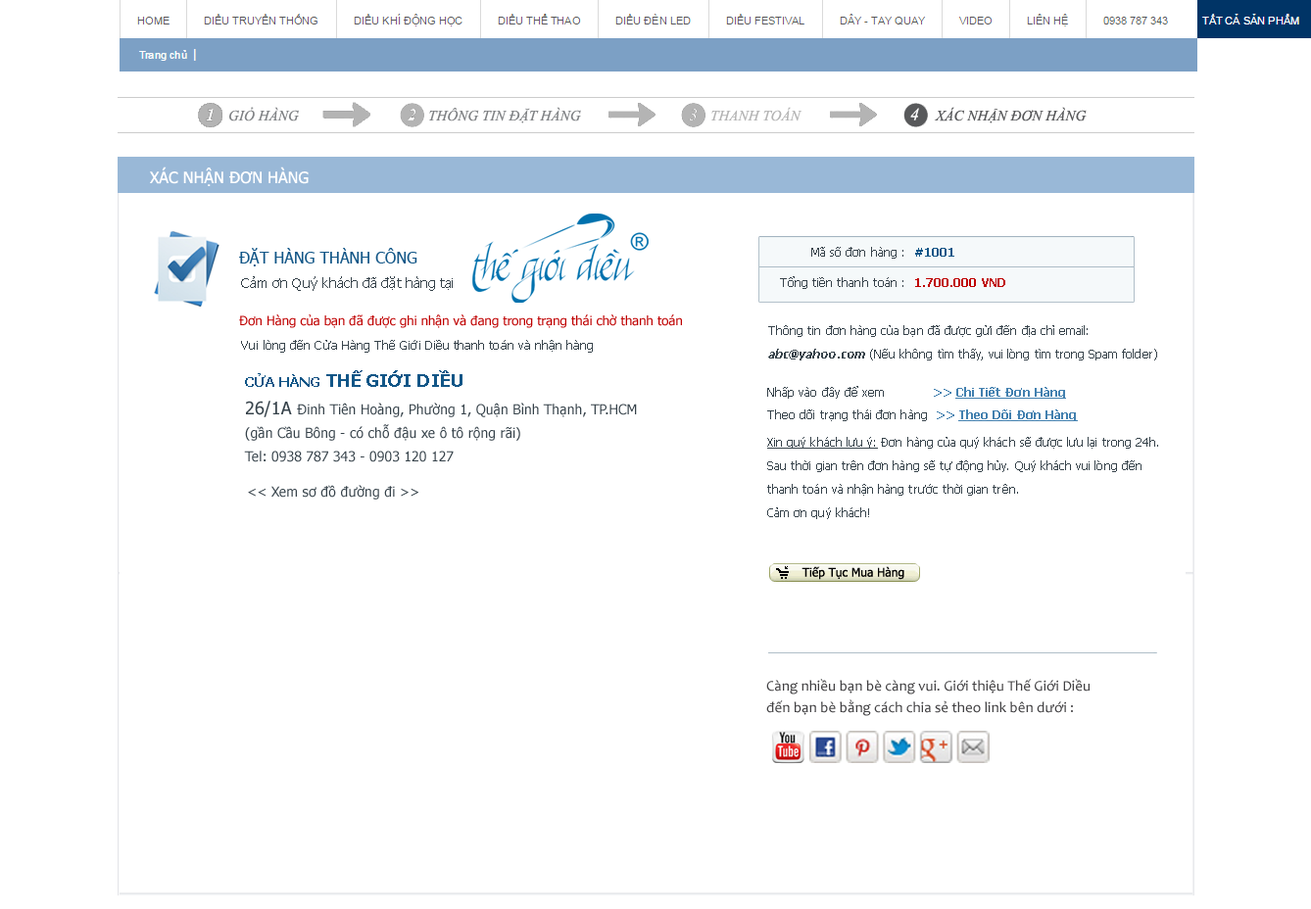
<style>
.page{position:relative;width:1311px;height:909px;background:#ffffff}
.page>*{position:absolute;margin:0}
.t1{font:14.7px "TimesNewRomanPS-ItalicMT";letter-spacing:0.005em;color:#808285}
.t2{font:14.7px "TimesNewRomanPS-ItalicMT";letter-spacing:0.005em;color:#b4b4b4}
.t3{font:17.6px "TimesNewRomanPS-ItalicMT";letter-spacing:0.005em;color:#ffffff}
.t4{font:14.7px "TimesNewRomanPS-ItalicMT";letter-spacing:0.005em;color:#58595b}
.t5{font:15.7px "Tahoma";letter-spacing:0.005em;color:#ffffff}
.t6{font:15.7px "Tahoma";letter-spacing:0.005em;color:#125687}
.t7{font:11.8px "Tahoma";letter-spacing:0.005em;color:#36424a}
.t8{font:11.8px "Tahoma-Bold";letter-spacing:0.005em;color:#125687}
.t9{font:13.7px "Tahoma";letter-spacing:0.005em;color:#36424a}
.t10{font:11.8px "Tahoma-Bold";letter-spacing:0.005em;color:#bf0000}
.t11{font:12.7px "Tahoma";letter-spacing:0.005em;color:#bf0000}
.t12{font:11.8px/23.5px "Tahoma";letter-spacing:0.005em;color:#36424a}
.t13{font:11.8px/23.5px "Tahoma-Bold";letter-spacing:0.005em;color:#36424a;font-style:italic}
.t14{font:12.7px "Tahoma";letter-spacing:0.005em;color:#36424a}
.t15{font:17.6px "Tahoma-Bold";letter-spacing:0.005em;color:#125687}
.t16{font:13.7px "Tahoma-Bold";letter-spacing:0.005em;color:#125687}
.t17{font:11.8px "Tahoma-Bold";letter-spacing:0.005em;color:#4280af}
.t18{font:11.8px "Tahoma-Bold";letter-spacing:0.005em;color:#4280af;text-decoration:underline}
.t19{font:13.7px/23.5px "Tahoma";letter-spacing:0.005em;color:#36424a}
.t20{font:17.6px/23.5px "Tahoma";letter-spacing:0.005em;color:#36424a}
.t21{font:11.8px/23.5px "Tahoma";letter-spacing:0.005em;color:#36424a;text-decoration:underline}
.t22{font:14.7px/21.6px "Candara";letter-spacing:0.005em;color:#414042}
</style>
<div class="page">
<p class="t1" style="left:229px;top:107px;width:70px;height:15px">GIỎ HÀNG</p>
<p class="t1" style="left:429px;top:107px;width:152px;height:16px">THÔNG TIN ĐẶT HÀNG</p>
<p class="t2" style="left:711px;top:107px;width:92px;height:15px">THANH TOÁN</p>
<p class="t3" style="left:910px;top:108px;width:9px;height:13px">4</p>
<p class="t4" style="left:934px;top:107px;width:153px;height:16px">XÁC NHẬN ĐƠN HÀNG</p>
<p class="t5" style="left:150px;top:167px;width:159px;height:19px">XÁC NHẬN ĐƠN HÀNG</p>
<p class="t6" style="left:239px;top:248px;width:178px;height:19px">ĐẶT HÀNG THÀNH CÔNG</p>
<p class="t7" style="left:811px;top:247px;width:93px;height:12px">Mã số đơn hàng :</p>
<p class="t8" style="left:915px;top:248px;width:39px;height:9px">#1001</p>
<p class="t9" style="left:241px;top:276px;width:212px;height:15px">Cảm ơn Quý khách đã đặt hàng tại</p>
<p class="t7" style="left:780px;top:276px;width:124px;height:13px">Tổng tiền thanh toán :</p>
<p class="t10" style="left:915px;top:278px;width:90px;height:9px">1.700.000 VND</p>
<p class="t11" style="left:239px;top:315px;width:443px;height:13px">Đơn Hàng của bạn đã được ghi nhận và đang trong trạng thái chờ thanh toán</p>
<p class="t12" style="left:768px;top:325px;width:389px;height:36px">Thông tin đơn hàng của bạn đã được gửi đến địa chỉ email: <br><span class="t13">abc@yahoo.com </span>(Nếu không tìm thấy, vui lòng tìm trong Spam folder)</p>
<p class="t14" style="left:241px;top:340px;width:352px;height:13px">Vui lòng đến Cửa Hàng Thế Giới Diều thanh toán và nhận hàng</p>
<p class="t15" style="left:245px;top:370px;width:218px;height:17px"><span class="t16">CỬA HÀNG</span> THẾ GIỚI DIỀU</p>
<p class="t7" style="left:767px;top:386px;width:299px;height:13px">Nhấp vào đây để xem<span class="t17">            &gt;&gt; </span><span class="t18">Chi Tiết Đơn Hàng</span></p>
<p class="t19" style="left:244px;top:401px;width:393px;height:62px"><span class="t20">26/1A </span>Đinh Tiên Hoàng, Phường 1, Quận Bình Thạnh, TP.HCM<br>(gần Cầu Bông - có chỗ đậu xe ô tô rộng rãi)<br>Tel: 0938 787 343 - 0903 120 127</p>
<p class="t7" style="left:767px;top:410px;width:311px;height:11px">Theo dõi trạng thái đơn hàng  <span class="t17">&gt;&gt; </span><span class="t18">Theo Dõi Đơn Hàng</span></p>
<p class="t12" style="left:767px;top:437px;width:391px;height:82px"><span class="t21">Xin quý khách lưu ý:</span> Đơn hàng của quý khách sẽ được lưu lại trong 24h.<br>Sau thời gian trên đơn hàng sẽ tự động hủy. Quý khách vui lòng đến<br>thanh toán và nhận hàng trước thời gian trên.<br>Cảm ơn quý khách!</p>
<p class="t9" style="left:248px;top:485px;width:170px;height:15px">&lt;&lt; Xem sơ đồ đường đi &gt;&gt;</p>
<p class="t22" style="left:766px;top:679px;width:325px;height:37px">Càng nhiều bạn bè càng vui. Giới thiệu Thế Giới Diều<br>đến bạn bè bằng cách chia sẻ theo link bên dưới :</p>
</div>
